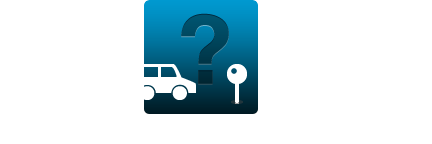
<style>
.page{position:relative;width:432px;height:144px;background:#ffffff}
.page>*{position:absolute;margin:0}
.t1{font:96.2px "Helvetica-Bold";color:#004860}
</style>
<div class="page">
<p class="t1" style="left:181px;top:13px;width:48px;height:71px">?</p>
</div>
